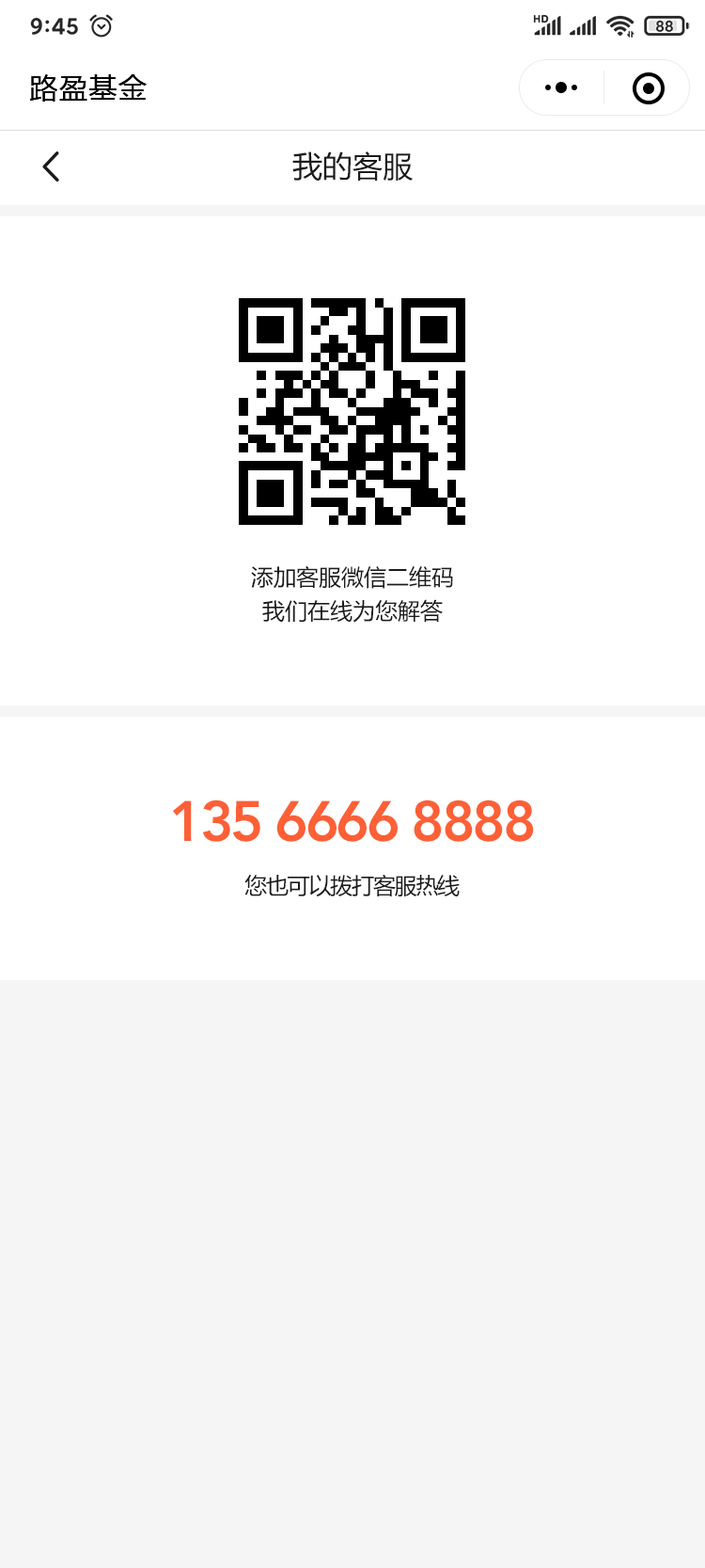
<style>
.page{position:relative;width:705px;height:1568px;background:#ffffff}
.page>*{position:absolute;margin:0}
.t1{font:28.2px "MicrosoftYaHei";letter-spacing:0.05em;color:#000000}
.t2{font:30.1px "MicrosoftYaHei";color:#1b1b1b}
.t3{font:22.6px/33.9px "MicrosoftYaHei";color:#1b1b1b}
.t4{font:56.4px "AvenirLTStd-Heavy";letter-spacing:-0.05em;color:#fd6036}
.t5{font:22.6px "MicrosoftYaHei";letter-spacing:-0.05em;color:#1b1b1b}
</style>
<div class="page">
<p class="t1" style="left:29px;top:74px;width:118px;height:28px">路盈基金</p>
<p class="t2" style="left:293px;top:151px;width:120px;height:30px">我的客服</p>
<p class="t3" style="left:251px;top:565px;width:202px;height:58px;text-align:center">添加客服微信二维码<br>我们在线为您解答</p>
<p class="t4" style="left:172px;top:800px;width:362px;height:42px">135 6666 8888</p>
<p class="t5" style="left:245px;top:874px;width:215px;height:23px">您也可以拨打客服热线</p>
</div>
